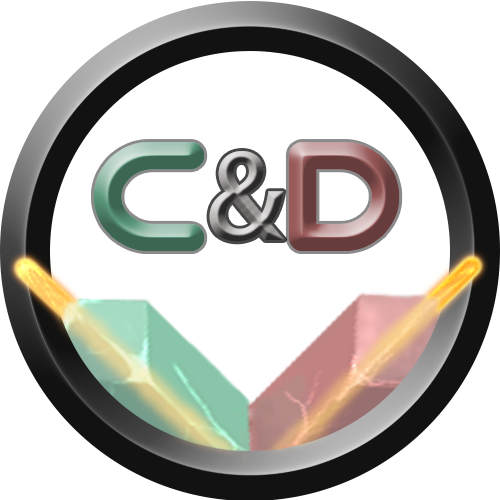
<style>
.page{position:relative;width:500px;height:500px;background:#ffffff}
.page>*{position:absolute;margin:0}
.t1{font:155.5px "Zian"}
.t2{font:113.9px "AdobeGothicStd-Bold"}
</style>
<div class="page">
<p class="t1" style="left:94px;top:142px;width:306px;height:109px">c  d</p>
<p class="t2" style="left:209px;top:151px;width:76px;height:91px">&amp;</p>
</div>
